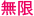
<style>
.page{position:relative;width:34px;height:16px;background:#ffffff}
.page>*{position:absolute;margin:0}
.t1{font:16.7px "MS-Gothic";color:#eb005e}
</style>
<div class="page">
<p class="t1" style="left:1px;top:0px;width:32px;height:16px">無限</p>
</div>
